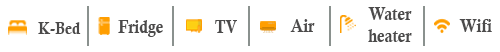
<style>
.page{position:relative;width:500px;height:52px;background:#ffffff}
.page>*{position:absolute;margin:0}
.t1{font:18px "CalisMTBol";color:#4b4a4a;scale:0.88 1}
.t2{font:17px "CalisMTBol";color:#4b4a4a;scale:0.88 1}
</style>
<div class="page">
<p class="t1" style="left:368px;top:7px;width:44px;height:35px;text-align:center">Water<br>heater</p>
<p class="t2" style="left:38px;top:22px;width:43px;height:12px">K-Bed</p>
<p class="t1" style="left:118px;top:20px;width:45px;height:17px">Fridge</p>
<p class="t1" style="left:215px;top:20px;width:22px;height:13px">TV</p>
<p class="t1" style="left:290px;top:19px;width:25px;height:13px">Air</p>
<p class="t1" style="left:459px;top:19px;width:33px;height:13px">Wifi</p>
</div>
